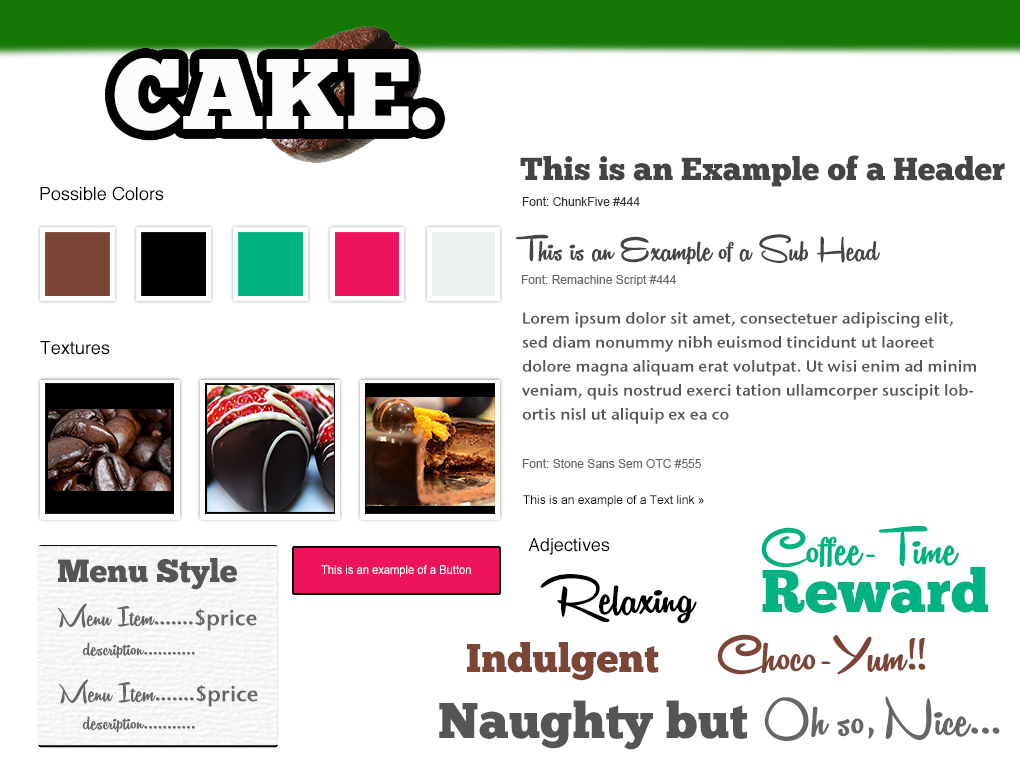
<style>
.page{position:relative;width:1020px;height:760px;background:#ffffff}
.page>*{position:absolute;margin:0}
.t1{font:32px "ChunkFive-Roman";color:#444444}
.t2{font:18px "Helvetica";color:#000000}
.t3{font:12px "ArialMT";color:#333333}
.t4{font:40px "RemachineScriptPersonalUseOnly";color:#444444}
.t5{font:12px "ArialMT";color:#666666}
.t6{font:16px/24px "StoneSansSemOSITCTTSemi";color:#555555}
.t7{font:12px "ArialMT";color:#000000}
.t8{font:60px/24px "RemachineScriptPersonalUseOnly";color:#00b281}
.t9{font:60px/24px "ChunkFive-Roman";color:#00b281}
.t10{font:32.1px "ChunkFive-Roman";color:#555555}
.t11{font:12px "ArialMT";color:#ffffff;scale:0.93 1}
.t12{font:60px "RemachineScriptPersonalUseOnly";color:#000000}
.t13{font:32.1px "RemachineScriptPersonalUseOnly";color:#666666}
.t14{font:21.4px "StoneSansSemOSITCTTSemi";color:#666666}
.t15{font:60px "RemachineScriptPersonalUseOnly";color:#7c4535}
.t16{font:26.8px "RemachineScriptPersonalUseOnly";color:#666666}
.t17{font:40px "ChunkFive-Roman";color:#7c4535}
.t18{font:50px "ChunkFive-Roman";color:#555555}
.t19{font:60px "RemachineScriptPersonalUseOnly";color:#666666}
</style>
<div class="page">
<p class="t1" style="left:520px;top:155px;width:485px;height:32px">This is an Example of a Header</p>
<p class="t2" style="left:40px;top:186px;width:124px;height:15px">Possible Colors</p>
<p class="t3" style="left:522px;top:197px;width:118px;height:9px">Font: ChunkFive #444</p>
<p class="t4" style="left:515px;top:234px;width:365px;height:31px">This is an Example of a Sub Head</p>
<p class="t5" style="left:521px;top:275px;width:155px;height:11px">Font: Remachine Script #444</p>
<p class="t6" style="left:522px;top:312px;width:454px;height:112px">Lorem ipsum dolor sit amet, consectetuer adipiscing elit, sed diam nonummy nibh euismod tincidunt ut laoreet dolore magna aliquam erat volutpat. Ut wisi enim ad minim veniam, quis nostrud exerci tation ullamcorper suscipit lobortis nisl ut aliquip ex ea co</p>
<p class="t2" style="left:40px;top:341px;width:70px;height:14px">Textures</p>
<p class="t5" style="left:522px;top:459px;width:179px;height:9px">Font: Stone Sans Sem OTC #555</p>
<p class="t7" style="left:523px;top:495px;width:181px;height:12px">This is an example of a Text link »</p>
<p class="t8" style="left:761px;top:526px;width:228px;height:88px">Coffee-Time<br><br><span class="t9">Reward</span></p>
<p class="t2" style="left:528px;top:538px;width:82px;height:17px">Adjectives</p>
<p class="t10" style="left:58px;top:558px;width:179px;height:32px">Menu Style</p>
<p class="t11" style="left:321px;top:565px;width:150px;height:12px">This is an example of a Button</p>
<p class="t12" style="left:540px;top:574px;width:157px;height:50px">Relaxing</p>
<p class="t13" style="left:57px;top:603px;width:200px;height:28px">Menu Item.......<span class="t14">$price</span></p>
<p class="t15" style="left:717px;top:634px;width:209px;height:41px">Choco-Yum!!</p>
<p class="t16" style="left:82px;top:642px;width:113px;height:17px">description...........</p>
<p class="t17" style="left:467px;top:642px;width:192px;height:39px">Indulgent</p>
<p class="t13" style="left:58px;top:679px;width:200px;height:28px">Menu Item.......<span class="t14">$price</span></p>
<p class="t18" style="left:439px;top:700px;width:308px;height:50px">Naughty but</p>
<p class="t19" style="left:764px;top:696px;width:236px;height:45px">Oh so, Nice...</p>
<p class="t16" style="left:82px;top:716px;width:113px;height:17px">description...........</p>
</div>
